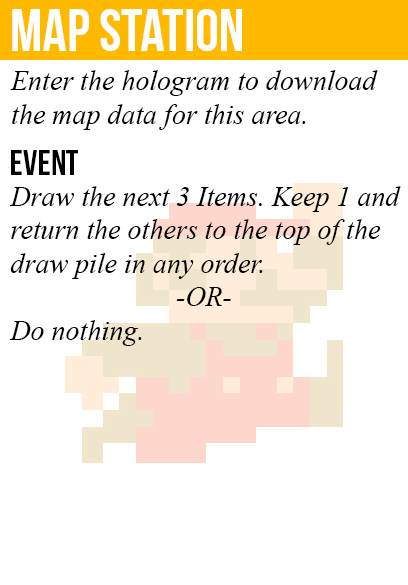
<style>
.page{position:relative;width:408px;height:585px;background:#ffffff}
.page>*{position:absolute;margin:0}
.t1{font:60px "BebasNeue";color:#ffffff}
.t2{font:28px "TimesNewRomanPS-ItalicMT";color:#000000}
.t3{font:36px "BebasNeue";color:#000000}
</style>
<div class="page">
<p class="t1" style="left:12px;top:9px;width:230px;height:42px">map station</p>
<p class="t2" style="left:10px;top:70px;width:368px;height:60px">Enter the hologram to download<br>the map data for this area.</p>
<p class="t3" style="left:11px;top:150px;width:67px;height:25px">event</p>
<p class="t2" style="left:9px;top:186px;width:392px;height:160px">Draw the next 3 Items. Keep 1 and<br>return the others to the top of the<br>draw pile in any order.<br><br>Do nothing.</p>
<p class="t2" style="left:176px;top:287px;width:55px;height:19px">-OR-</p>
</div>
